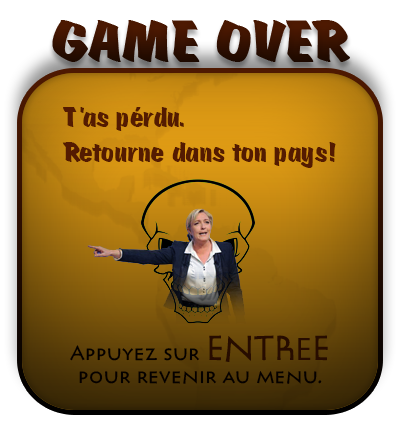
<style>
.page{position:relative;width:400px;height:431px}
.page>*{position:absolute;margin:0}
.t1{font:62.6px "Scratch";color:#371201}
.t2{font:29.1px "Scratch";color:#541b01}
.t3{font:19.6px "Pericles";color:#040100}
.t4{font:32.1px "Pericles";color:#270c00}
.t5{font:32.1px "MyriadPro-Regular";color:#270c00}
</style>
<div class="page">
<p class="t1" style="left:52px;top:20px;width:298px;height:42px">GAME OVER</p>
<p class="t2" style="left:62px;top:107px;width:274px;height:61px">T’as pérdu. <br>Retourne dans ton pays!</p>
<p class="t3" style="left:70px;top:335px;width:258px;height:49px;text-align:center">Appuyez sur <span class="t4">ENTR</span><span class="t5">E</span><span class="t4">E<br></span>pour revenir au menu.</p>
</div>
